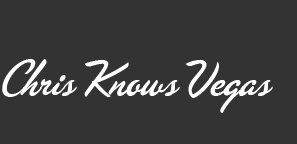
<style>
.page{position:relative;width:297px;height:144px;background:#333333}
.page>*{position:absolute;margin:0}
.t1{font:52px "LasVegasFabulous";color:#ffffff}
</style>
<div class="page">
<p class="t1" style="left:2px;top:59px;width:271px;height:54px">Chris Knows Vegas</p>
</div>
